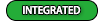
<style>
.page{position:relative;width:103px;height:21px;background:#24ac38}
.page>*{position:absolute;margin:0}
.t1{font:10px "AdobeHeitiStd-Regular";color:#ffffff}
</style>
<div class="page">
<p class="t1" style="left:23px;top:6px;width:58px;height:9px">INTEGRATED</p>
</div>
